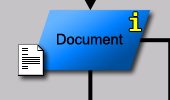
<style>
.page{position:relative;width:170px;height:100px;background:#c6c3c6}
.page>*{position:absolute;margin:0}
.t1{font:24px "Fixedsys";color:#ffff00}
.t2{font:14.7px "ArialMT";color:#000000}
</style>
<div class="page">
<p class="t1" style="left:129px;top:12px;width:12px;height:19px">i</p>
<p class="t2" style="left:57px;top:33px;width:66px;height:12px">Document</p>
</div>
